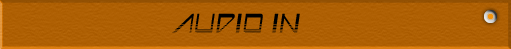
<style>
.page{position:relative;width:511px;height:49px}
.page>*{position:absolute;margin:0}
.t1{font:30px "AstronBoyVideo";letter-spacing:0.05em;color:#000000}
</style>
<div class="page">
<p class="t1" style="left:172px;top:13px;width:128px;height:20px">AUDIO IN</p>
</div>
